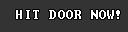
<style>
.page{position:relative;width:128px;height:32px;background:#333333}
.page>*{position:absolute;margin:0}
.t1{font:12px "Terminal";letter-spacing:0.075em;color:#ffffff}
</style>
<div class="page">
<p class="t1" style="left:16px;top:10px;width:104px;height:9px">HIT DOOR NOW!</p>
</div>
